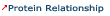
<style>
.page{position:relative;width:110px;height:16px;background:#ffffff}
.page>*{position:absolute;margin:0}
.t1{font:8px "Verdana";color:#16486c;scale:1.2 1}
</style>
<div class="page">
<p class="t1" style="left:8px;top:4px;width:96px;height:9px">Protein Relationship</p>
</div>
